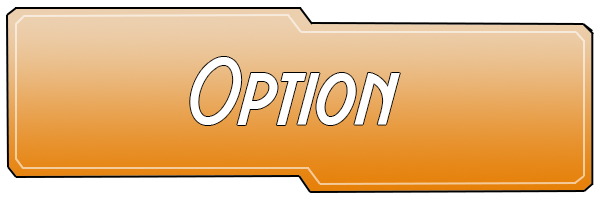
<style>
.page{position:relative;width:600px;height:200px;background:#ffffff}
.page>*{position:absolute;margin:0}
.t1{font:100px "AeroviasBrasilNF";color:#ffffff}
</style>
<div class="page">
<p class="t1" style="left:190px;top:57px;width:210px;height:68px">Option</p>
</div>
